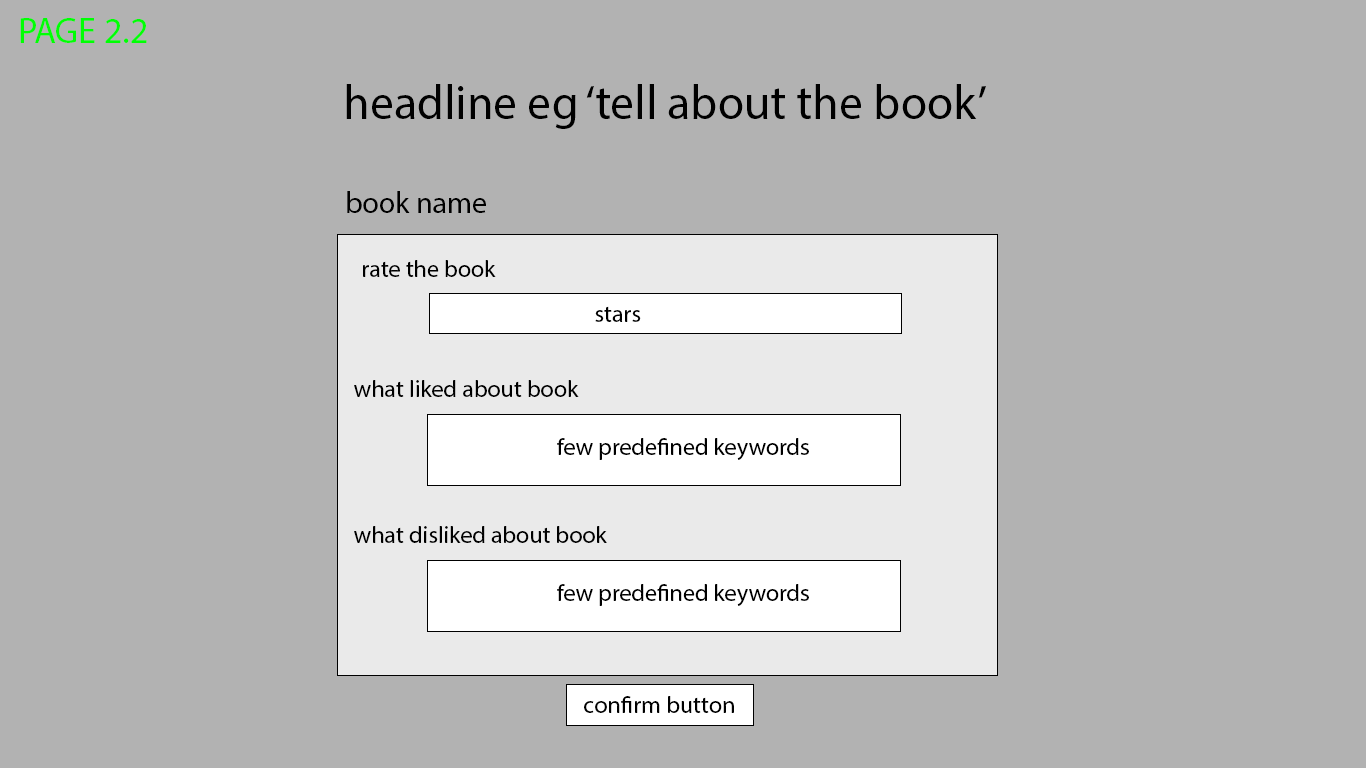
<style>
.page{position:relative;width:1366px;height:768px;background:#b2b2b2}
.page>*{position:absolute;margin:0}
.t1{font:36px "MyriadPro-Regular";color:#00ff04}
.t2{font:48px "MyriadPro-Regular";color:#000000}
.t3{font:30px "MyriadPro-Regular";color:#000000}
.t4{font:24px "MyriadPro-Regular";color:#000000}
</style>
<div class="page">
<p class="t1" style="left:20px;top:18px;width:127px;height:25px">PAGE 2.2</p>
<p class="t2" style="left:346px;top:84px;width:640px;height:45px">headline eg ‘tell about the book’</p>
<p class="t3" style="left:347px;top:191px;width:139px;height:22px">book name</p>
<p class="t4" style="left:363px;top:260px;width:133px;height:17px">rate the book</p>
<p class="t4" style="left:595px;top:306px;width:46px;height:16px">stars</p>
<p class="t4" style="left:354px;top:380px;width:225px;height:17px">what liked about book</p>
<p class="t4" style="left:557px;top:438px;width:252px;height:22px">few predefined keywords</p>
<p class="t4" style="left:354px;top:526px;width:253px;height:17px">what disliked about book</p>
<p class="t4" style="left:557px;top:584px;width:252px;height:22px">few predefined keywords</p>
<p class="t4" style="left:584px;top:696px;width:150px;height:17px">confirm button</p>
</div>
